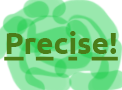
<style>
.page{position:relative;width:122px;height:90px;background:#99e8ad}
.page>*{position:absolute;margin:0}
.t1{font:30px "Ubuntu-Bold";color:#4a7d18;text-decoration:underline}
.t2{font:30px "Ubuntu-Bold";color:#4a7d18}
</style>
<div class="page">
<p class="t1" style="left:4px;top:31px;width:114px;height:30px">P<span class="t2">r</span>e<span class="t2">c</span>i<span class="t2">s</span>e!</p>
</div>
